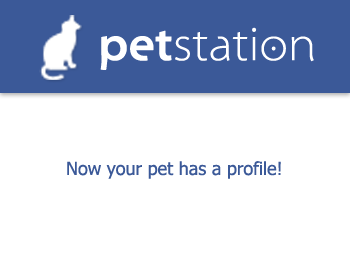
<style>
.page{position:relative;width:350px;height:256px;background:#ffffff}
.page>*{position:absolute;margin:0}
.t1{font:48px "Santana";color:#ffffff}
.t2{font:48px "Santana-Bold";color:#ffffff}
.t3{font:18px "Tahoma";color:#3b5998}
</style>
<div class="page">
<p class="t1" style="left:100px;top:27px;width:214px;height:43px"><span class="t2">pet</span>station</p>
<p class="t3" style="left:67px;top:161px;width:214px;height:18px">Now your pet has a profile!</p>
</div>
